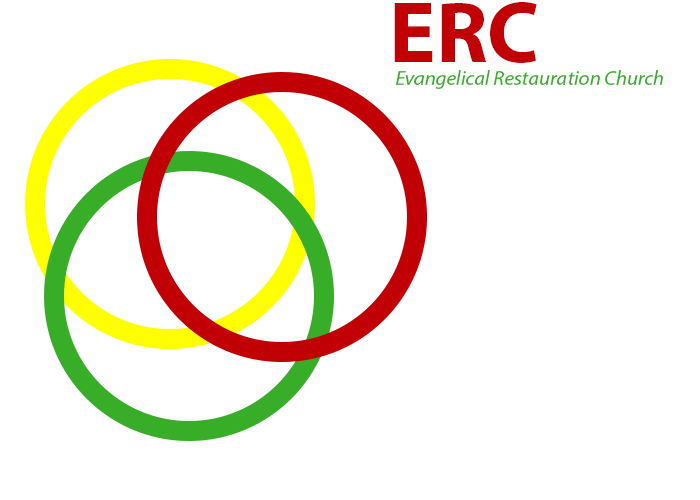
<style>
.page{position:relative;width:700px;height:500px;background:#ffffff}
.page>*{position:absolute;margin:0}
.t1{font:87.5px "MyriadPro-Bold";color:#c00005}
.t2{font:20.8px "MyriadPro-It";color:#38ad28}
</style>
<div class="page">
<p class="t1" style="left:394px;top:2px;width:143px;height:61px">ERC</p>
<p class="t2" style="left:396px;top:70px;width:267px;height:19px">Evangelical Restauration Church</p>
</div>
